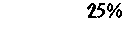
<style>
.page{position:relative;width:128px;height:32px;background:#ffffff}
.page>*{position:absolute;margin:0}
.t1{font:24px "DomCasualBT-Regular";color:#000000}
</style>
<div class="page">
<p class="t1" style="left:87px;top:3px;width:35px;height:15px">25%</p>
</div>
